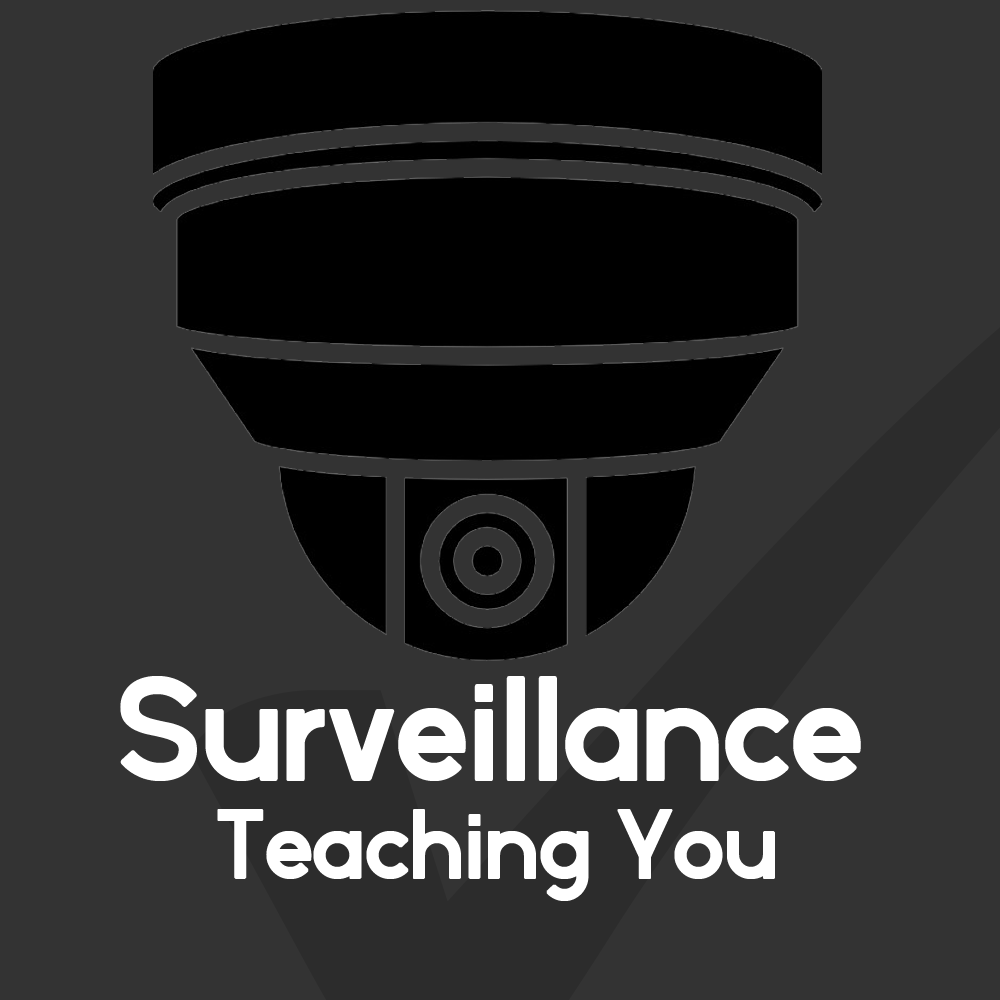
<style>
.page{position:relative;width:1000px;height:1000px;background:#333333}
.page>*{position:absolute;margin:0}
.t1{font:187.5px "perfectlyamicable";color:#ffffff}
.t2{font:125px "perfectlyamicable";color:#ffffff}
</style>
<div class="page">
<p class="t1" style="left:120px;top:676px;width:741px;height:105px">Surveillance</p>
<p class="t2" style="left:217px;top:809px;width:558px;height:92px">Teaching You</p>
</div>
